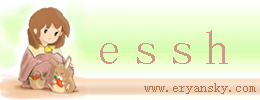
<style>
.page{position:relative;width:260px;height:100px}
.page>*{position:absolute;margin:0}
.t1{font:48px "YouYuan";color:#ce9987}
.t2{font:14px "YouYuan";color:#b0764d}
</style>
<div class="page">
<p class="t1" style="left:100px;top:30px;width:128px;height:34px">e s s h</p>
<p class="t2" style="left:144px;top:83px;width:112px;height:11px">www.eryansky.com</p>
</div>
